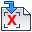
<style>
.page{position:relative;width:32px;height:32px;background:#ffffff}
.page>*{position:absolute;margin:0}
.t1{font:14px "HelveticaNeueLTW1G-Hv";color:#ff0000}
</style>
<div class="page">
<p class="t1" style="left:7px;top:15px;width:10px;height:10px">X</p>
<p class="t1" style="left:7px;top:15px;width:10px;height:10px">X</p>
</div>
